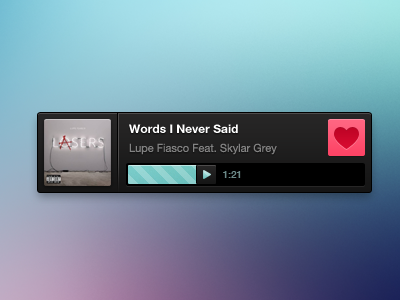
<style>
.page{position:relative;width:400px;height:300px}
.page>*{position:absolute;margin:0}
.t1{font:12px "HelveticaNeueLTCom-Bd";color:#ffffff}
.t2{font:11px "HelveticaNeueLTCom-Roman";color:#838383}
.t3{font:10px "HelveticaNeueLTCom-Md";color:#6c8a89}
</style>
<div class="page">
<p class="t1" style="left:129px;top:124px;width:109px;height:9px">Words I Never Said</p>
<p class="t2" style="left:129px;top:143px;width:148px;height:12px">Lupe Fiasco Feat. Skylar Grey</p>
<p class="t3" style="left:223px;top:171px;width:18px;height:7px">1:21</p>
</div>
